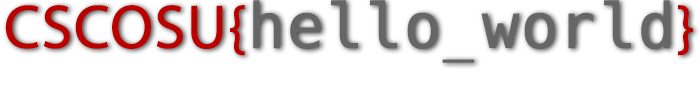
<style>
.page{position:relative;width:700px;height:100px;background:#ffffff}
.page>*{position:absolute;margin:0}
.t1{font:62px "Hack-Regular";color:#666666;font-weight:bold}
.t2{font:62px "MyriadPro-Regular";color:#bb0000;font-weight:bold}
</style>
<div class="page">
<p class="t1" style="left:5px;top:0px;width:688px;height:63px"><span class="t2">CSCOSU{</span>hello_world<span class="t2">}</span></p>
</div>
